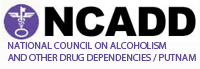
<style>
.page{position:relative;width:200px;height:69px;background:#fcfcfc}
.page>*{position:absolute;margin:0}
.t1{font:10px "MyriadPro-Regular";color:#614b99}
</style>
<div class="page">
<p class="t1" style="left:8px;top:42px;width:188px;height:20px">NATIONAL COUNCIL ON ALCOHOLISM <br>AND OTHER DRUG DEPENDENCIES / PUTNAM</p>
</div>
